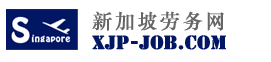
<style>
.page{position:relative;width:271px;height:62px;background:#ffffff}
.page>*{position:absolute;margin:0}
.t1{font:20px "STZhongsong";letter-spacing:0.1em;color:#666666;font-weight:bold}
.t2{font:18px "StencilStd";color:#021763;font-weight:bold}
</style>
<div class="page">
<p class="t1" style="left:92px;top:11px;width:132px;height:20px">新加坡劳务网</p>
<p class="t2" style="left:92px;top:35px;width:134px;height:15px">xjp-job.com</p>
</div>
